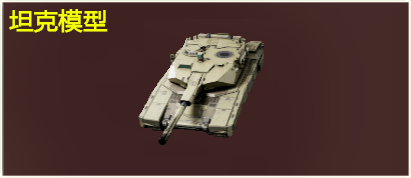
<style>
.page{position:relative;width:411px;height:178px}
.page>*{position:absolute;margin:0}
.t1{font:24px "MicrosoftYaHeiUI";color:#f4ff00;font-weight:bold}
</style>
<div class="page">
<p class="t1" style="left:9px;top:9px;width:99px;height:24px">坦克模型</p>
</div>
